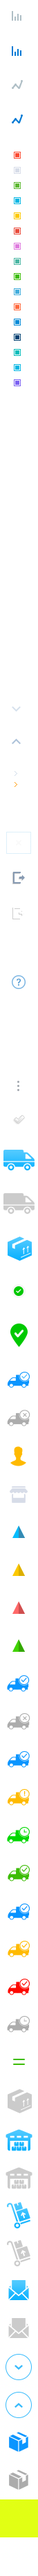
<style>
.page{position:relative;width:38px;height:2576px;background:#ffffff}
.page>*{position:absolute;margin:0}
.t1{font:6.9px "MyriadPro-Regular";color:#ffba00}
</style>
<div class="page">
<p class="t1" style="left:24px;top:1791px;width:2px;height:5px">!</p>
</div>
